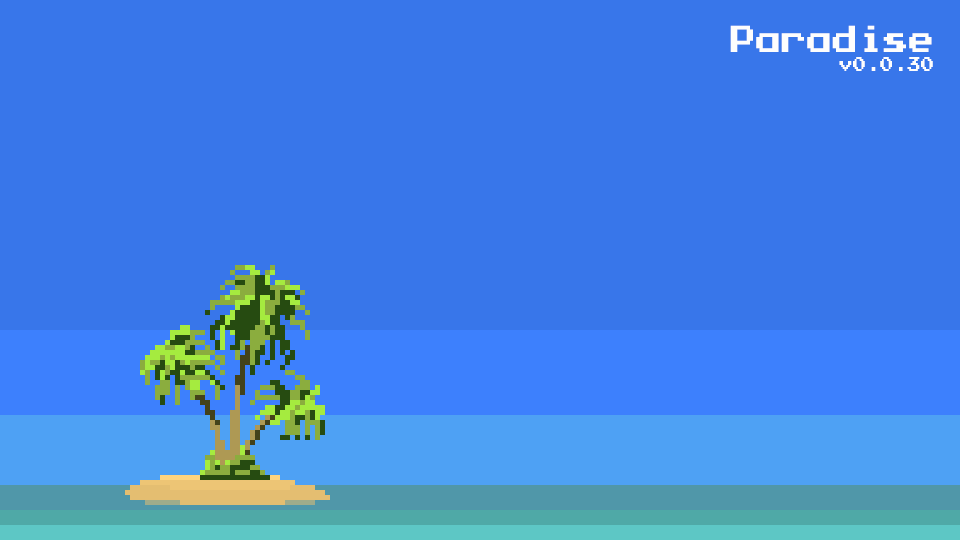
<style>
.page{position:relative;width:960px;height:540px;background:#3876ea}
.page>*{position:absolute;margin:0}
.t1{font:30px "PressStartK";color:#fdfdfd;scale:0.85 1}
.t2{font:16px "PressStartK";color:#fdfdfd;scale:0.85 1}
</style>
<div class="page">
<p class="t1" style="left:730px;top:25px;width:203px;height:46px;text-align:right">Paradise<br><span class="t2">v0.0.30</span></p>
</div>
